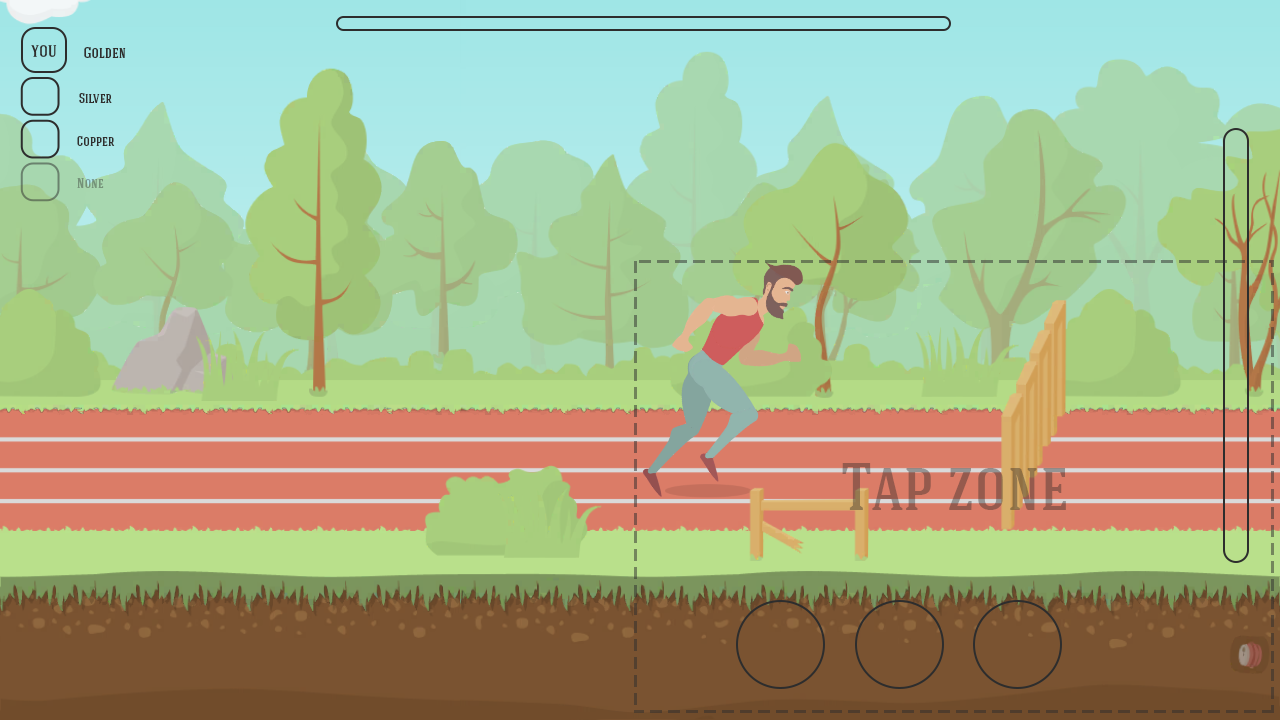
<style>
.page{position:relative;width:1280px;height:720px}
.page>*{position:absolute;margin:0}
.t1{font:18px "HaginCapsMedium";color:#302e2d}
.t2{font:15px "HaginCapsMedium";color:#302e2d}
.t3{font:13.5px "HaginCapsMedium";color:#302e2d}
.t4{font:13.5px "HaginCapsMedium";color:#759279}
.t5{font:67.3px "HaginCapsMedium"}
</style>
<div class="page">
<p class="t1" style="left:31px;top:45px;width:26px;height:12px">you</p>
<p class="t2" style="left:84px;top:47px;width:42px;height:11px">Golden</p>
<p class="t3" style="left:79px;top:93px;width:33px;height:10px">Silver</p>
<p class="t3" style="left:77px;top:136px;width:38px;height:10px">Copper</p>
<p class="t4" style="left:77px;top:178px;width:27px;height:10px">None</p>
<p class="t5" style="left:842px;top:463px;width:224px;height:47px">Tap zone</p>
</div>
